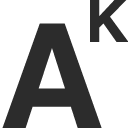
<style>
.page{position:relative;width:128px;height:128px;background:#ffffff}
.page>*{position:absolute;margin:0}
.t1{font:60px "Helvetica-Bold";letter-spacing:-0.035em;color:#2c2c2c}
.t2{font:145px "Helvetica-Bold";letter-spacing:-0.035em;color:#2c2c2c}
</style>
<div class="page">
<p class="t1" style="left:90px;top:0px;width:39px;height:42px">K</p>
<p class="t2" style="left:2px;top:23px;width:100px;height:105px">A</p>
</div>
